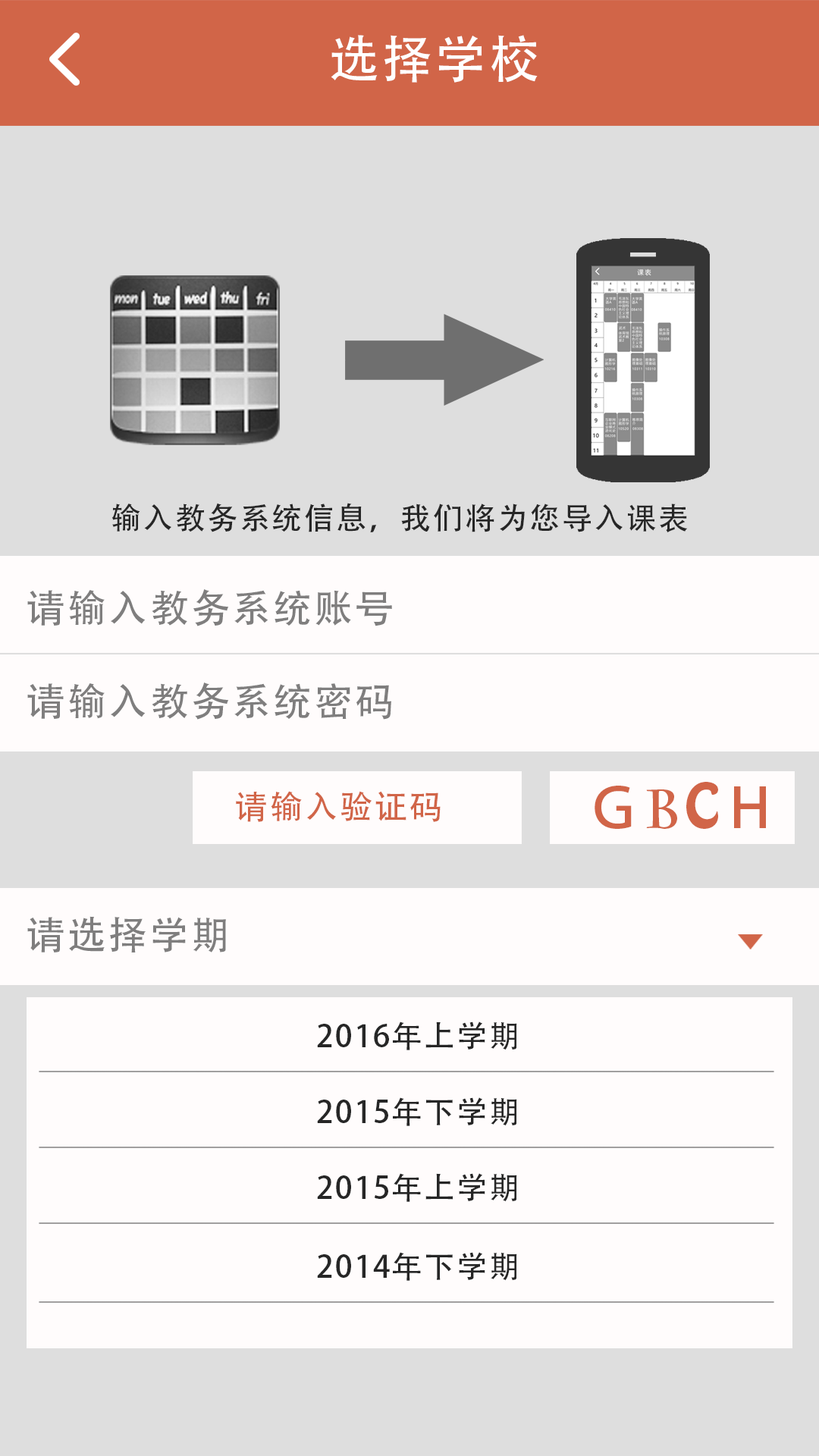
<style>
.page{position:relative;width:819px;height:1456px;background:#fffcfc}
.page>*{position:absolute;margin:0}
.t1{font:50.8px "AdobeHeitiStd-Regular";letter-spacing:0.06em;color:#ffffff}
.t2{font:30.4px "AdobeHeitiStd-Regular";letter-spacing:0.06em;color:#262626}
.t3{font:38.7px "AdobeHeitiStd-Regular";letter-spacing:0.06em;color:#7f7e7e}
.t4{font:54.6px "AdobeHeitiStd-Regular";letter-spacing:0.06em;color:#d16548}
.t5{font:54.6px "CharlemagneStd-Bold";letter-spacing:0.06em;color:#d16548}
.t6{font:54.6px "HoboStd";letter-spacing:0.06em;color:#d16548}
.t7{font:32.8px "AdobeHeitiStd-Regular";letter-spacing:0.06em;color:#d16548}
.t8{font:30.7px "AdobeHeitiStd-Regular";letter-spacing:0.06em;color:#262626}
</style>
<div class="page">
<p class="t1" style="left:331px;top:35px;width:207px;height:48px">选择学校</p>
<p class="t2" style="left:111px;top:503px;width:577px;height:29px">输入教务系统信息，我们将为您导入课表</p>
<p class="t3" style="left:27px;top:589px;width:365px;height:37px">请输入教务系统账号</p>
<p class="t3" style="left:27px;top:682px;width:364px;height:38px">请输入教务系统密码</p>
<p class="t4" style="left:595px;top:782px;width:171px;height:47px">Ｇ<span class="t5">B</span><span class="t6">C</span>Ｈ</p>
<p class="t7" style="left:236px;top:791px;width:205px;height:31px">请输入验证码</p>
<p class="t3" style="left:27px;top:916px;width:199px;height:36px">请选择学期</p>
<p class="t8" style="left:317px;top:1021px;width:200px;height:29px">2016年上学期</p>
<p class="t8" style="left:317px;top:1097px;width:200px;height:29px">2015年下学期</p>
<p class="t8" style="left:317px;top:1173px;width:200px;height:29px">2015年上学期</p>
<p class="t8" style="left:317px;top:1252px;width:200px;height:29px">2014年下学期</p>
</div>
